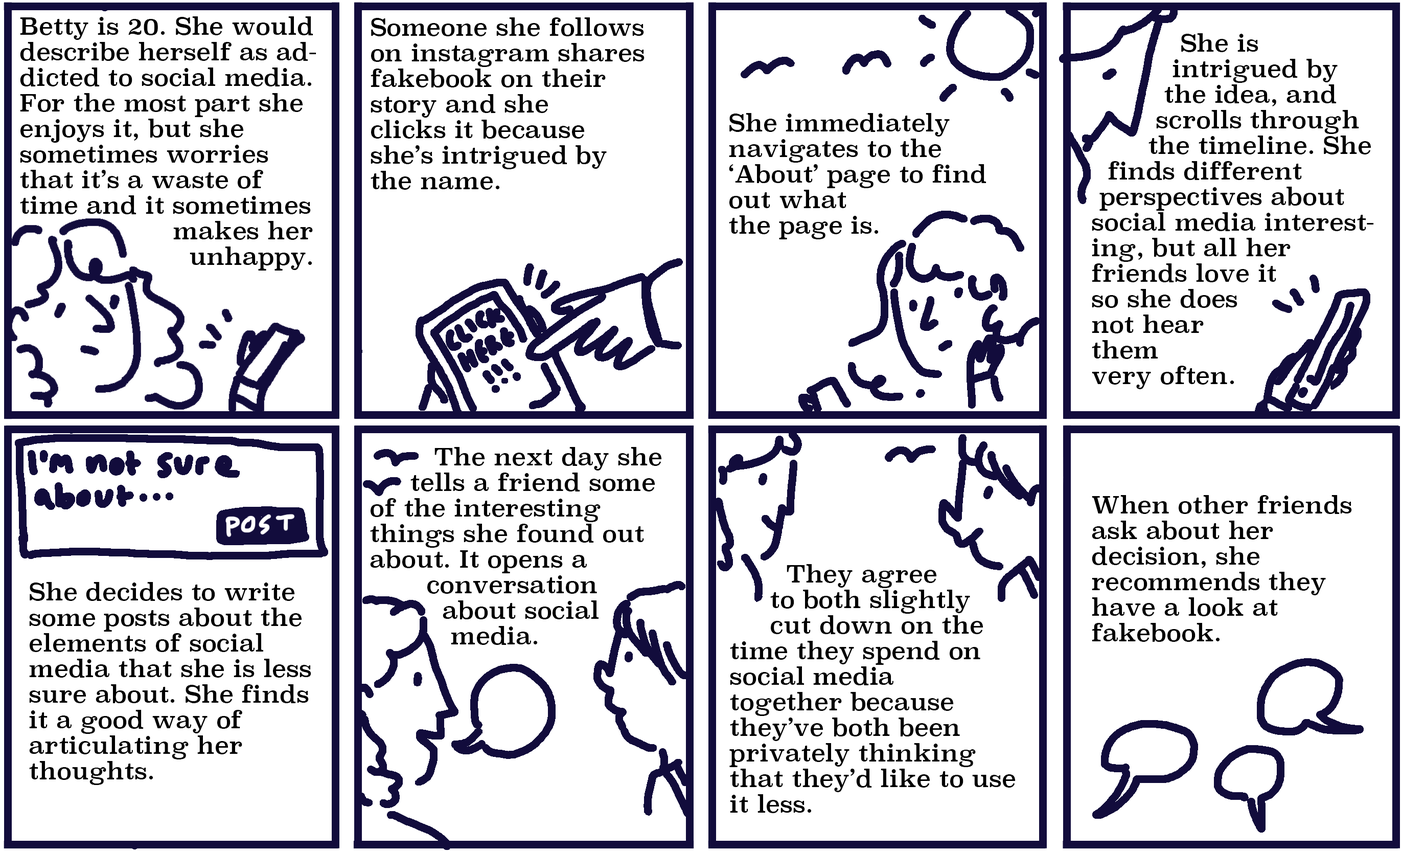
<style>
.page{position:relative;width:1402px;height:851px;background:#ffffff}
.page>*{position:absolute;margin:0}
.t1{font:23.4px/25.6px "Superclarendon-Regular";color:#000000}
.t2{font:23.4px/25.6px "Superclarendon-Regular";color:#120c3c}
</style>
<div class="page">
<p class="t1" style="left:20px;top:16px;width:296px;height:254px">Betty is 20. She would describe herself as addicted to social media. For the most part she enjoys it, but she sometimes worries that it’s a waste of time and it sometimes <br>                   makes her <br>                     unhappy.</p>
<p class="t1" style="left:371px;top:17px;width:274px;height:173px">Someone she follows on instagram shares fakebook on their story and she <br>clicks it because she’s intrigued by the name.</p>
<p class="t1" style="left:1092px;top:33px;width:282px;height:356px">She is <br>          intrigued by         <br>         the idea, and <br>        scrolls through  <br>       the timeline. She<br>  finds different <br> perspectives about social media interesting, but all her friends love it <br>so she does<br>not hear <br>them<br>very often.</p>
<p class="t1" style="left:729px;top:113px;width:257px;height:126px">She immediately <br>navigates to the <br>‘About’ page to find <br>out what<br>the page is.</p>
<p class="t1" style="left:370px;top:447px;width:292px;height:198px"><span class="t2">       </span> The next day she       <br>     tells a friend some of the interesting things she found out about. It opens a <br>       conversation <br>         about social<br>          media.</p>
<p class="t1" style="left:1092px;top:495px;width:260px;height:146px">When other friends ask about her <br>decision, she <br>recommends they have a look at <br>fakebook.</p>
<p class="t1" style="left:729px;top:564px;width:287px;height:249px">They agree <br>     to both slightly <br>     cut down on the time they spend on social media <br>together because they’ve both been <br>privately thinking that they’d like to use it less.</p>
<p class="t1" style="left:29px;top:582px;width:282px;height:203px">She decides to write some posts about the elements of social media that she is less sure about. She finds it a good way of <br>articulating her thoughts.</p>
</div>
